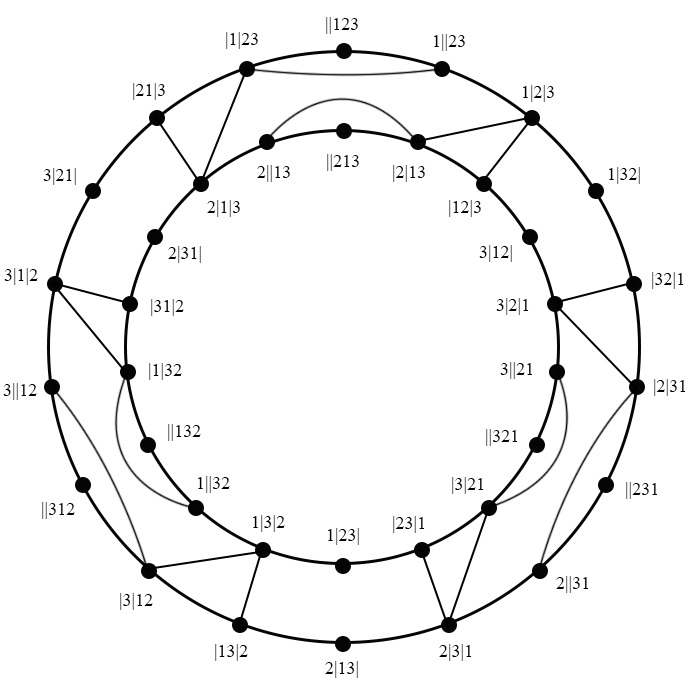
<style>
.page{position:relative;width:700px;height:700px;background:#ffffff}
.page>*{position:absolute;margin:0}
.t1{font:18px "TimesNewRomanPSMT";color:#000000}
</style>
<div class="page">
<p class="t1" style="left:326px;top:17px;width:32px;height:17px">||123</p>
<p class="t1" style="left:226px;top:32px;width:32px;height:17px">|1|23</p>
<p class="t1" style="left:434px;top:34px;width:31px;height:17px">1||23</p>
<p class="t1" style="left:133px;top:83px;width:32px;height:17px">|21|3</p>
<p class="t1" style="left:523px;top:85px;width:31px;height:17px">1|2|3</p>
<p class="t1" style="left:327px;top:154px;width:32px;height:17px">||213</p>
<p class="t1" style="left:43px;top:168px;width:33px;height:17px">3|21|</p>
<p class="t1" style="left:257px;top:165px;width:33px;height:17px">2||13</p>
<p class="t1" style="left:393px;top:165px;width:32px;height:17px">|2|13</p>
<p class="t1" style="left:609px;top:167px;width:31px;height:17px">1|32|</p>
<p class="t1" style="left:207px;top:200px;width:33px;height:17px">2|1|3</p>
<p class="t1" style="left:449px;top:200px;width:32px;height:17px">|12|3</p>
<p class="t1" style="left:168px;top:246px;width:33px;height:17px">2|31|</p>
<p class="t1" style="left:479px;top:245px;width:33px;height:17px">3|12|</p>
<p class="t1" style="left:4px;top:268px;width:34px;height:17px">3|1|2</p>
<p class="t1" style="left:652px;top:272px;width:32px;height:17px">|32|1</p>
<p class="t1" style="left:151px;top:299px;width:33px;height:17px">|31|2</p>
<p class="t1" style="left:496px;top:298px;width:33px;height:17px">3|2|1</p>
<p class="t1" style="left:149px;top:363px;width:33px;height:17px">|1|32</p>
<p class="t1" style="left:500px;top:362px;width:33px;height:17px">3||21</p>
<p class="t1" style="left:3px;top:383px;width:34px;height:17px">3||12</p>
<p class="t1" style="left:654px;top:379px;width:32px;height:17px">|2|31</p>
<p class="t1" style="left:168px;top:424px;width:33px;height:17px">||132</p>
<p class="t1" style="left:486px;top:429px;width:32px;height:17px">||321</p>
<p class="t1" style="left:198px;top:476px;width:32px;height:17px">1||32</p>
<p class="t1" style="left:452px;top:477px;width:32px;height:17px">|3|21</p>
<p class="t1" style="left:626px;top:482px;width:32px;height:17px">||231</p>
<p class="t1" style="left:42px;top:502px;width:33px;height:17px">||312</p>
<p class="t1" style="left:253px;top:515px;width:32px;height:17px">1|3|2</p>
<p class="t1" style="left:393px;top:516px;width:32px;height:17px">|23|1</p>
<p class="t1" style="left:328px;top:528px;width:31px;height:17px">1|23|</p>
<p class="t1" style="left:556px;top:576px;width:33px;height:17px">2||31</p>
<p class="t1" style="left:120px;top:593px;width:33px;height:17px">|3|12</p>
<p class="t1" style="left:215px;top:644px;width:33px;height:17px">|13|2</p>
<p class="t1" style="left:439px;top:644px;width:33px;height:17px">2|3|1</p>
<p class="t1" style="left:325px;top:661px;width:33px;height:17px">2|13|</p>
</div>
